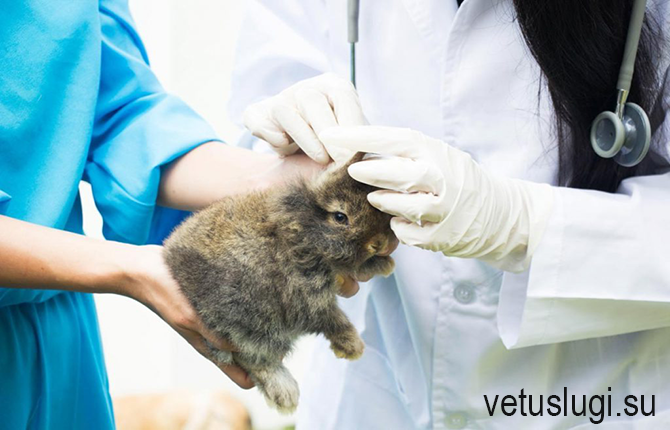
<style>
.page{position:relative;width:670px;height:430px}
.page>*{position:absolute;margin:0}
.t1{font:40px "ArialNarrow";letter-spacing:0.002em;color:#121314}
</style>
<div class="page">
<p class="t1" style="left:483px;top:387px;width:172px;height:37px">vetuslugi.su</p>
</div>
